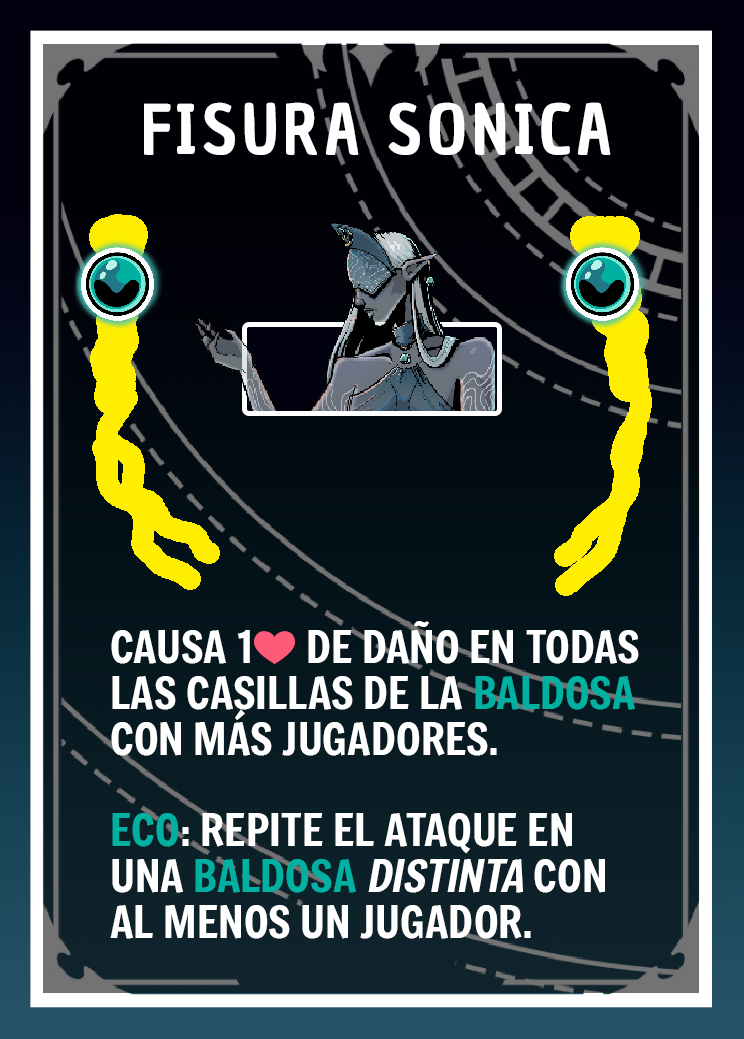
<style>
.page{position:relative;width:744px;height:1039px}
.page>*{position:absolute;margin:0}
.t1{font:66.7px "ChauPhilomeneOne-Regular";letter-spacing:0.075em;color:#ffffff}
.t2{font:43.7px/45.8px "Freeman-Regular";color:#ffffff}
.t3{font:43.7px/45.8px "EmojiOneColor";color:#ffffff}
.t4{font:43.7px/45.8px "Freeman-Regular";color:#00b1a2}
.t5{font:43.7px/45.8px "Freeman-Regular";color:#ffffff;font-style:italic}
</style>
<div class="page">
<p class="t1" style="left:144px;top:102px;width:467px;height:53px">FISURA SONICA</p>
<p class="t2" style="left:110px;top:621px;width:529px;height:318px">CAUSA 1<span class="t3">❤️</span> DE DAÑO EN TODAS LAS CASILLAS DE LA <span class="t4">BALDOSA </span>CON MÁS JUGADORES. <br><br><span class="t4">ECO</span>: REPITE EL ATAQUE EN UNA <span class="t4">BALDOSA </span><span class="t5">DISTINTA </span>CON AL MENOS UN JUGADOR.</p>
</div>
